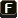
<style>
.page{position:relative;width:18px;height:18px;background:#101103}
.page>*{position:absolute;margin:0}
.t1{font:16px "NeoDunggeunmo-Regular";color:#ffffff}
</style>
<div class="page">
<p class="t1" style="left:5px;top:3px;width:8px;height:10px">F</p>
</div>
